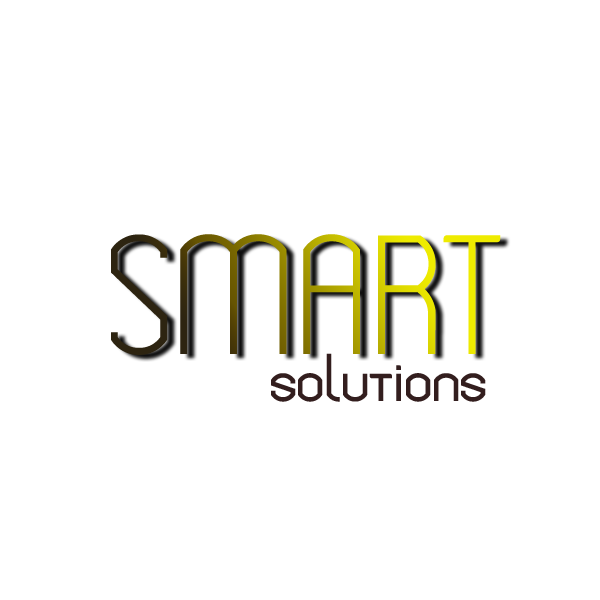
<style>
.page{position:relative;width:600px;height:600px;background:#ffffff}
.page>*{position:absolute;margin:0}
.t1{font:166.7px "ModekaExtended-Regular"}
.t2{font:66.7px "ModekaExtended-Bold";color:#331e1e}
</style>
<div class="page">
<p class="t1" style="left:111px;top:234px;width:390px;height:121px">SMART</p>
<p class="t2" style="left:271px;top:353px;width:215px;height:49px">solutions</p>
</div>
